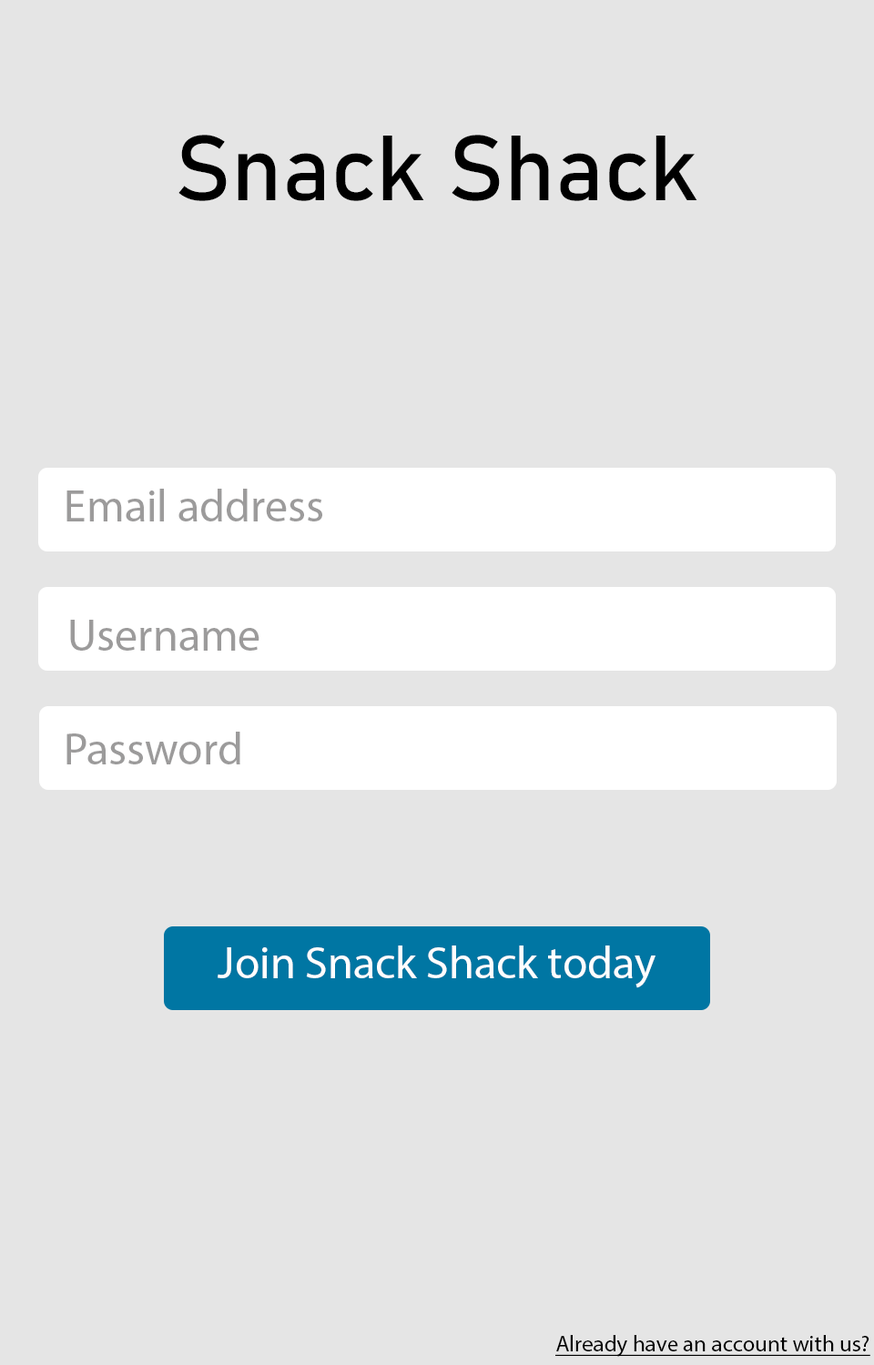
<style>
.page{position:relative;width:874px;height:1365px;background:#e5e5e5}
.page>*{position:absolute;margin:0}
.t1{font:91px "Bahnschrift";color:#000000}
.t2{font:45.5px "MyriadPro-Regular";color:#9c9b9b}
.t3{font:45.5px "MyriadPro-Regular";color:#fffefe}
.t4{font:22.7px "MyriadPro-Regular";color:#000000;text-decoration:underline}
</style>
<div class="page">
<p class="t1" style="left:178px;top:135px;width:519px;height:66px">Snack Shack</p>
<p class="t2" style="left:66px;top:489px;width:256px;height:32px">Email address</p>
<p class="t2" style="left:70px;top:620px;width:189px;height:31px">Username</p>
<p class="t2" style="left:66px;top:732px;width:174px;height:32px">Password</p>
<p class="t3" style="left:217px;top:945px;width:438px;height:43px">Join Snack Shack today</p>
<p class="t4" style="left:555px;top:1335px;width:315px;height:22px">Already have an account with us?</p>
</div>
